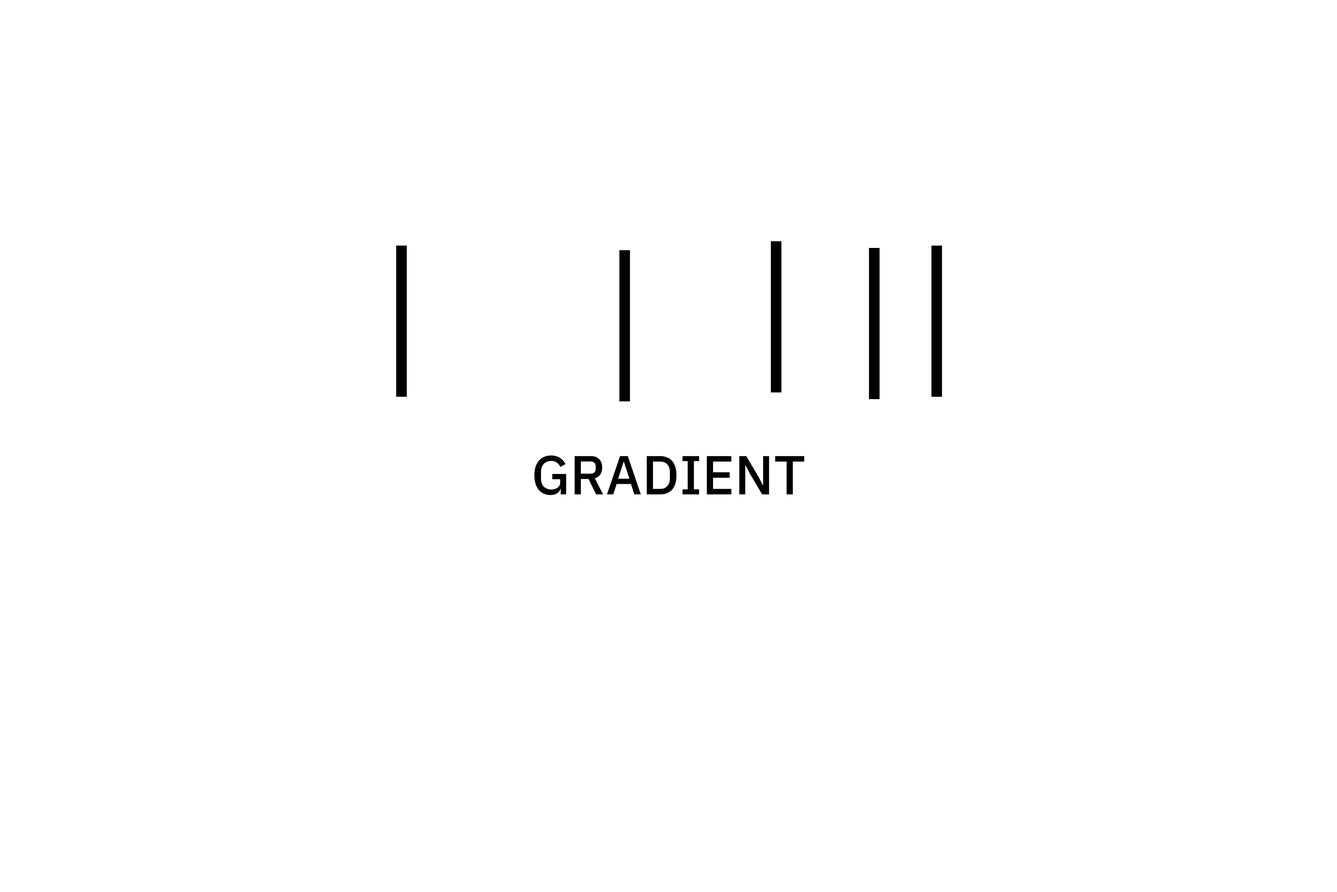
<style>
.page{position:relative;width:1337px;height:892px;background:#ffffff}
.page>*{position:absolute;margin:0}
.t1{font:54.9px "IBMPlexSans-Medium";color:#000000}
</style>
<div class="page">
<p class="t1" style="left:534px;top:455px;width:271px;height:40px">GRADIENT</p>
</div>
